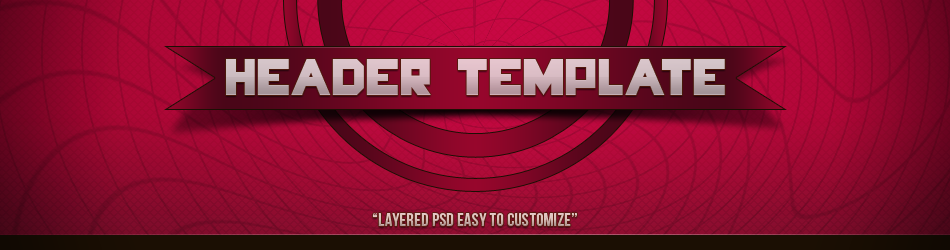
<style>
.page{position:relative;width:950px;height:250px}
.page>*{position:absolute;margin:0}
.t1{font:48px "HungerGames"}
.t2{font:18px "BebasNeue";letter-spacing:0.02em;color:#d8beb9}
</style>
<div class="page">
<p class="t1" style="left:226px;top:59px;width:499px;height:36px">HEADER TEMPLATE</p>
<p class="t2" style="left:372px;top:213px;width:205px;height:13px">“Layered PSD easy to customize”</p>
</div>
